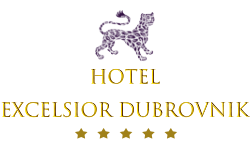
<style>
.page{position:relative;width:250px;height:150px;background:#ffffff}
.page>*{position:absolute;margin:0}
.t1{font:19px "TrajanColor-Concept";letter-spacing:-0.01em}
</style>
<div class="page">
<p class="t1" style="left:1px;top:68px;width:250px;height:50px;text-align:center">Hotel<br>Excelsior Dubrovnik</p>
</div>
